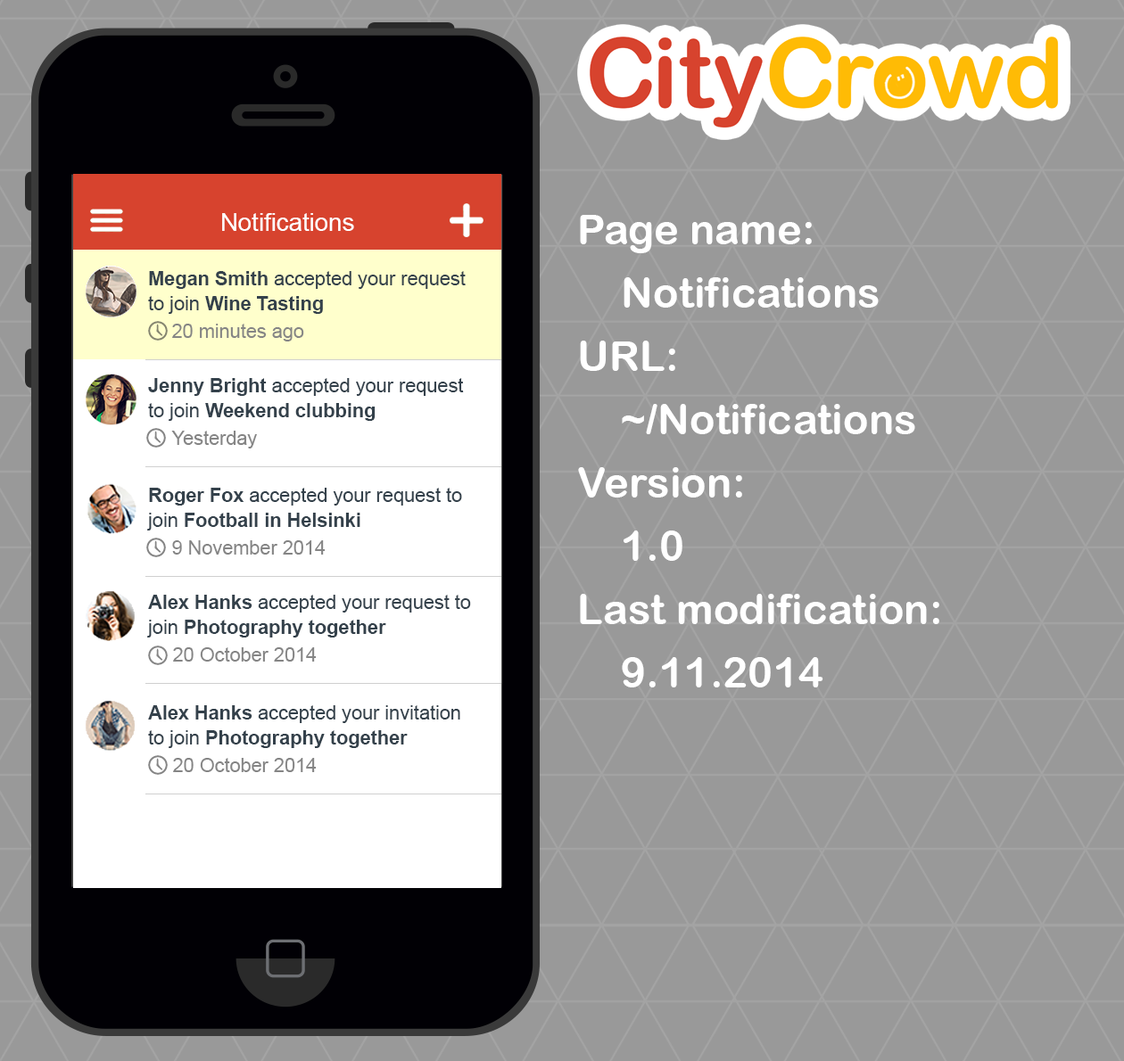
<style>
.page{position:relative;width:1124px;height:1061px;background:#999999}
.page>*{position:absolute;margin:0}
.t1{font:24.6px "ArialMT";color:#ffffff}
.t2{font:42.2px/63.3px "ArialRoundedMTBold";color:#ffffff}
.t3{font:19.3px/24.6px "ArialMT";color:#34414b}
.t4{font:19.3px/24.6px "Arial-BoldMT";color:#34414b}
.t5{font:19.3px "ArialMT";color:#858585}
</style>
<div class="page">
<p class="t1" style="left:222px;top:213px;width:132px;height:18px">Notifications</p>
<p class="t2" style="left:578px;top:215px;width:361px;height:473px">Page name:<br>Notifications<br>URL:<br>~/Notifications<br>Version:<br>1.0<br>Last modification:<br>9.11.2014</p>
<p class="t3" style="left:148px;top:271px;width:318px;height:43px"><span class="t4">Megan Smith </span>accepted your request <br>to join <span class="t4">Wine Tasting</span></p>
<p class="t5" style="left:172px;top:324px;width:132px;height:18px">20 minutes ago</p>
<p class="t3" style="left:148px;top:378px;width:316px;height:43px"><span class="t4">Jenny Bright</span> accepted your request <br>to join <span class="t4">Weekend clubbing</span></p>
<p class="t5" style="left:171px;top:431px;width:86px;height:18px">Yesterday</p>
<p class="t3" style="left:147px;top:488px;width:315px;height:43px"><span class="t4">Roger Fox</span> accepted your request to<br>join <span class="t4">Football in Helsinki</span></p>
<p class="t5" style="left:172px;top:540px;width:154px;height:15px">9 November 2014</p>
<p class="t3" style="left:147px;top:595px;width:324px;height:43px"><span class="t4">Alex Hanks</span> accepted your request to <br>join <span class="t4">Photography together</span></p>
<p class="t5" style="left:173px;top:647px;width:144px;height:15px">20 October 2014</p>
<p class="t3" style="left:148px;top:705px;width:312px;height:43px"><span class="t4">Alex Hanks</span> accepted your invitation <br>to join <span class="t4">Photography together</span></p>
<p class="t5" style="left:173px;top:758px;width:144px;height:14px">20 October 2014</p>
</div>
